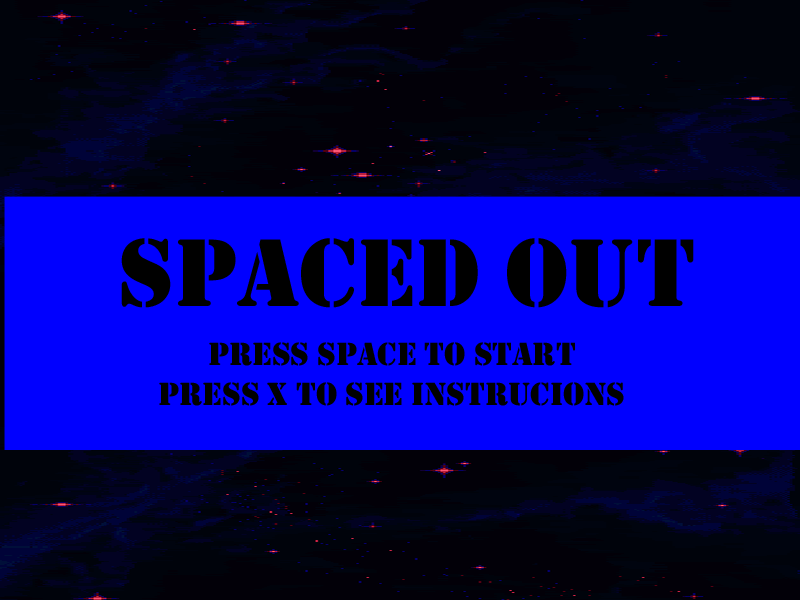
<style>
.page{position:relative;width:800px;height:600px;background:#0000ff}
.page>*{position:absolute;margin:0}
.t1{font:99.6px "Stencil";color:#000000}
.t2{font:33.2px "Stencil";color:#000000}
</style>
<div class="page">
<p class="t1" style="left:121px;top:238px;width:573px;height:70px">SpaceD Out</p>
<p class="t2" style="left:159px;top:342px;width:465px;height:64px;text-align:center">press Space to Start<br>Press X to see Instrucions</p>
</div>
